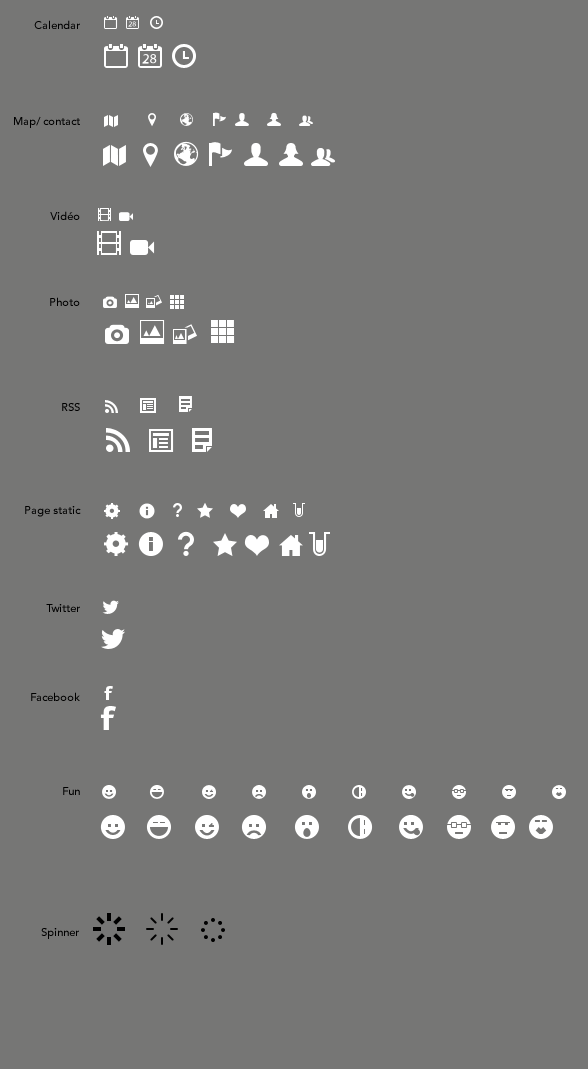
<style>
.page{position:relative;width:588px;height:1069px;background:#767675}
.page>*{position:absolute;margin:0}
.t1{font:11px "Avenir-Medium";color:#000000}
</style>
<div class="page">
<p class="t1" style="left:34px;top:20px;width:46px;height:9px">Calendar</p>
<p class="t1" style="left:14px;top:116px;width:66px;height:12px">Map/ contact</p>
<p class="t1" style="left:50px;top:211px;width:30px;height:9px">Vidéo</p>
<p class="t1" style="left:50px;top:297px;width:30px;height:9px">Photo</p>
<p class="t1" style="left:62px;top:403px;width:18px;height:8px">RSS</p>
<p class="t1" style="left:25px;top:506px;width:56px;height:11px">Page static</p>
<p class="t1" style="left:46px;top:604px;width:34px;height:8px">Twitter</p>
<p class="t1" style="left:31px;top:692px;width:49px;height:9px">Facebook</p>
<p class="t1" style="left:63px;top:787px;width:17px;height:8px">Fun</p>
<p class="t1" style="left:41px;top:928px;width:38px;height:11px">Spinner</p>
</div>
